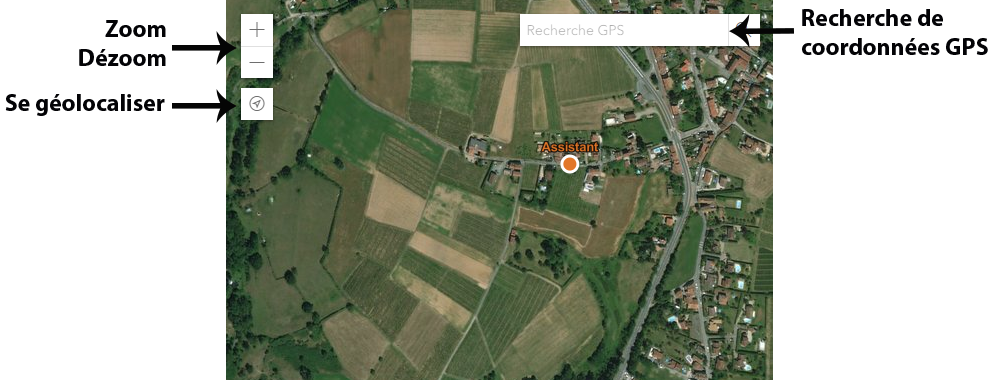
<style>
.page{position:relative;width:1000px;height:380px;background:#ffffff}
.page>*{position:absolute;margin:0}
.t1{font:24px "MyriadPro-Bold";color:#030306}
</style>
<div class="page">
<p class="t1" style="left:802px;top:9px;width:186px;height:46px">Recherche de <br>coordonnées GPS</p>
<p class="t1" style="left:79px;top:20px;width:87px;height:46px;text-align:right">Zoom<br>Dézoom</p>
<p class="t1" style="left:5px;top:94px;width:160px;height:22px">Se géolocaliser</p>
</div>
